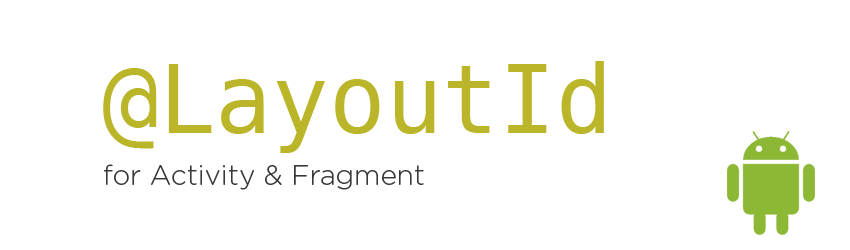
<style>
.page{position:relative;width:850px;height:250px;background:#ffffff}
.page>*{position:absolute;margin:0}
.t1{font:94.5px "Menlo-Regular";color:#bbb529}
.t2{font:27.8px "GothamRounded-Light";color:#373737}
</style>
<div class="page">
<p class="t1" style="left:103px;top:61px;width:501px;height:92px">@LayoutId</p>
<p class="t2" style="left:103px;top:164px;width:321px;height:26px">for Activity &amp; Fragment</p>
</div>
